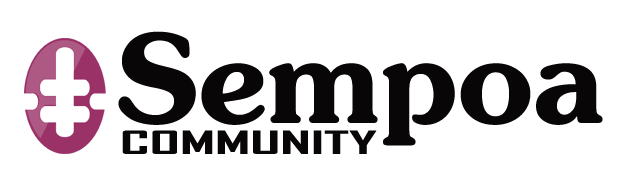
<style>
.page{position:relative;width:618px;height:189px;background:#ffffff}
.page>*{position:absolute;margin:0}
.t1{font:200px "JasmineUPCBold";color:#080607}
.t2{font:30.5px "AgencyFB-Bold";color:#080607;scale:2.08 1}
</style>
<div class="page">
<p class="t1" style="left:118px;top:31px;width:485px;height:115px">Sempoa</p>
<p class="t2" style="left:122px;top:130px;width:255px;height:24px">COMMUNITY</p>
</div>
